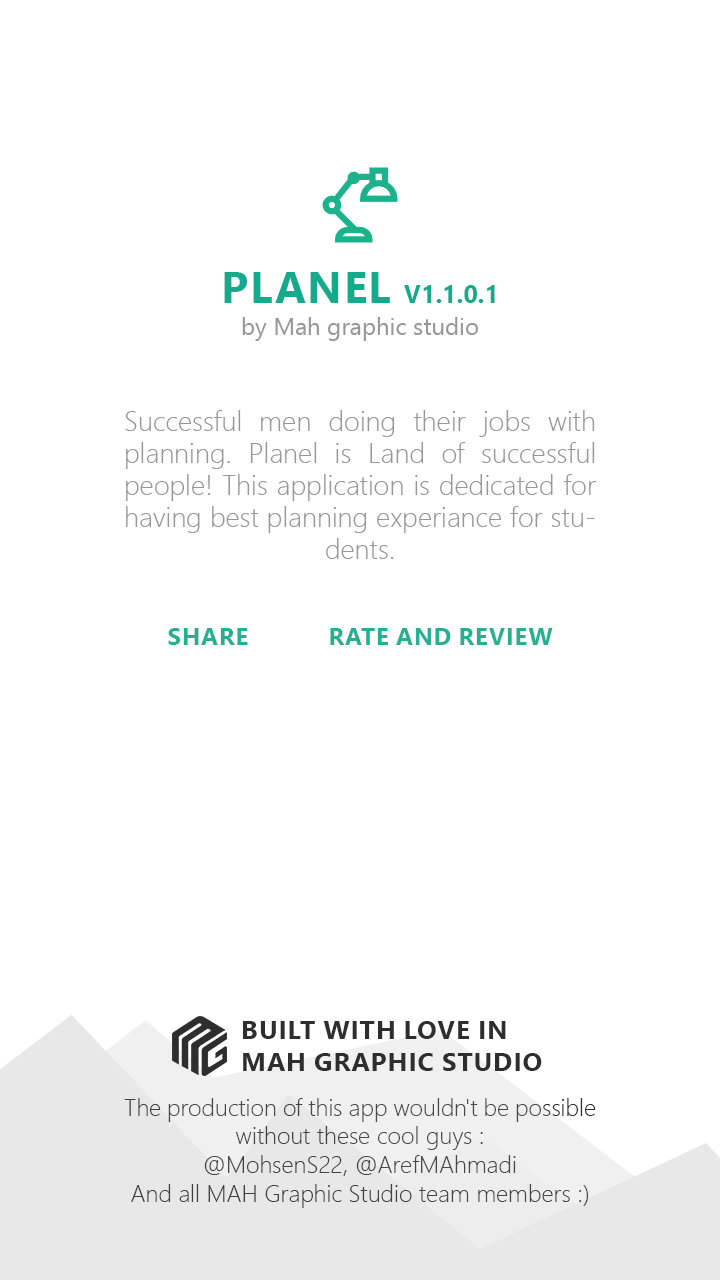
<style>
.page{position:relative;width:720px;height:1280px;background:#ffffff}
.page>*{position:absolute;margin:0}
.t1{font:28px/32px "SegoeUI-Light";color:#979797}
.t2{font:44px "SegoeUI-Bold";color:#13ab8b;text-transform:uppercase}
.t3{font:25px "SegoeUI-Bold";color:#13ab8b;text-transform:uppercase}
.t4{font:24px/32px "SegoeUI";color:#979797}
.t5{font:24px "SegoeUI-Bold";color:#26b092;text-transform:uppercase}
.t6{font:24px "SegoeUI-Light";color:#2e2e2e}
.t7{font:26px "SegoeUI-Bold";color:#2e2e2e;text-transform:uppercase}
.t8{font:26px "TimesNewRomanPSMT";color:#2e2e2e;text-transform:uppercase}
</style>
<div class="page">
<p class="t1" style="left:124px;top:272px;width:472px;height:936px;text-align:justify"><span class="t2">Planel </span><span class="t3">v1.1.0.1<br></span><span class="t4">by Mah graphic studio<br><br><br></span>Successful men doing their jobs with planning. Planel is Land of successful people! This application is dedicated for having best planning experiance for students. <br><span class="t5"><br><br>Share            Rate and Review<br><br><br><br><br><br><br><br><br><br><br><br><br><br><br></span><span class="t6">The production of this app wouldn't be possible without these cool guys :<br>@MohsenS22, @ArefMAhmadi<br>And all MAH Graphic Studio team members :)</span></p>
<p class="t7" style="left:243px;top:1021px;width:299px;height:50px">Built with<span class="t8">️</span> Love in <br>MAH Graphic Studio</p>
</div>
